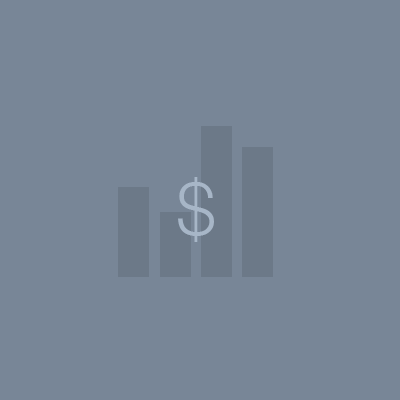
<style>
.page{position:relative;width:400px;height:400px;background:#788697}
.page>*{position:absolute;margin:0}
.t1{font:72px "HelveticaNeue-Light";color:#a7b6c7}
</style>
<div class="page">
<p class="t1" style="left:178px;top:177px;width:36px;height:65px">$</p>
</div>
